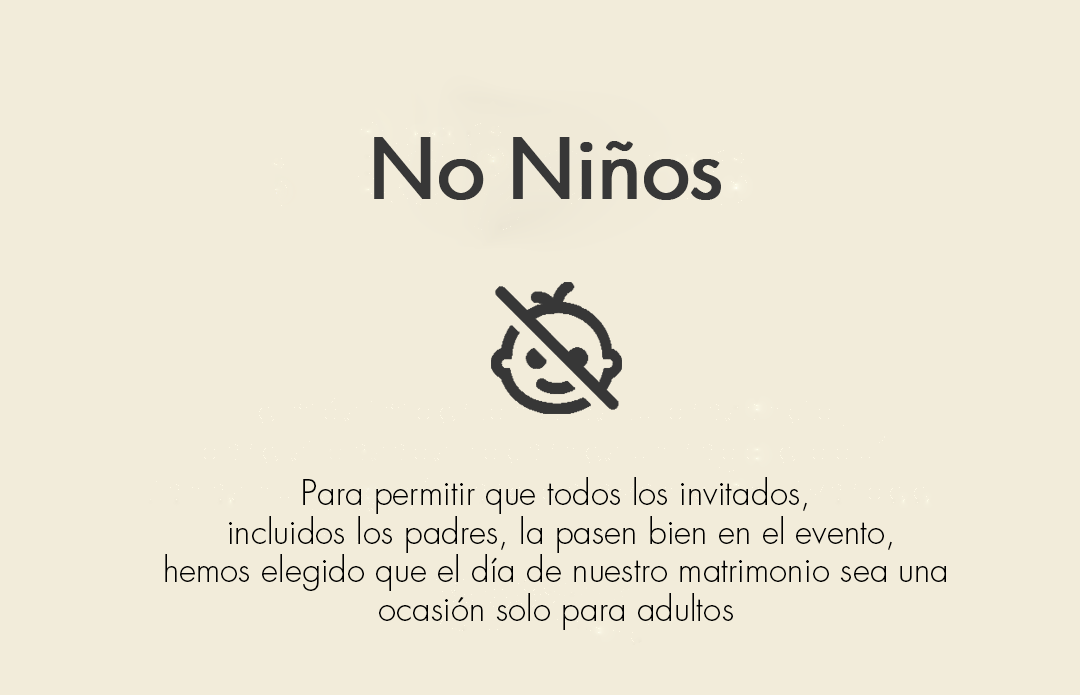
<style>
.page{position:relative;width:1080px;height:695px;background:#f2ecda}
.page>*{position:absolute;margin:0}
.t1{font:81.3px "GraphicusDT-Regular";color:#373737;font-weight:bold}
.t2{font:33.3px/38.9px "Futura-Light";color:#000000}
</style>
<div class="page">
<p class="t1" style="left:374px;top:137px;width:347px;height:63px">No Niños</p>
<p class="t2" style="left:165px;top:477px;width:781px;height:153px;text-align:center">Para permitir que todos los invitados,<br> incluidos los padres, la pasen bien en el evento,<br> hemos elegido que el día de nuestro matrimonio sea una <br>ocasión solo para adultos</p>
</div>
